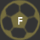
<style>
.page{position:relative;width:40px;height:40px;background:#333333}
.page>*{position:absolute;margin:0}
.t1{font:10px "CenturyGothic";color:#fcfcfc;text-transform:uppercase;font-weight:bold}
</style>
<div class="page">
<p class="t1" style="left:18px;top:17px;width:5px;height:8px">f</p>
</div>
